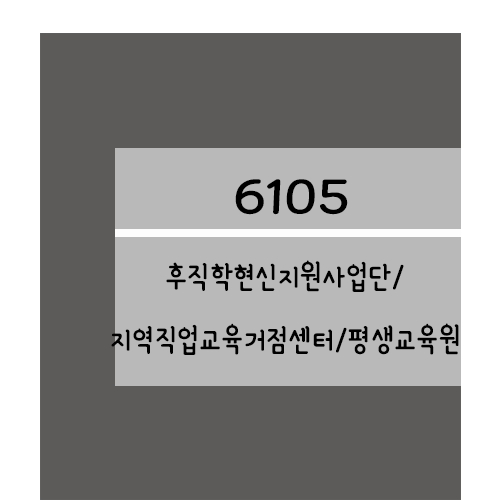
<style>
.page{position:relative;width:500px;height:500px;background:#5d5a5a}
.page>*{position:absolute;margin:0}
.t1{font:61.2px "YanoljaYacheR";color:#000000;scale:1.18 1}
.t2{font:36px "YanoljaYacheR";color:#000000}
</style>
<div class="page">
<p class="t1" style="left:235px;top:179px;width:113px;height:36px">6105</p>
<p class="t2" style="left:111px;top:260px;width:348px;height:95px;text-align:center">후직학현신지원사업단/<br>지역직업교육거점센터/평생교육원</p>
</div>
